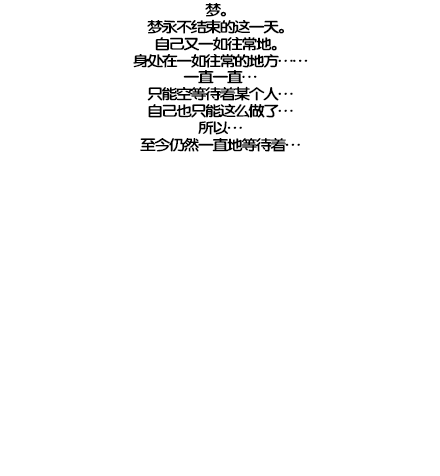
<style>
.page{position:relative;width:440px;height:476px;background:#ffffff}
.page>*{position:absolute;margin:0}
.t1{font:14.7px/16.8px "FZY4K--GBK1-0";letter-spacing:-0.13em;color:#000000;scale:1.14 1}
</style>
<div class="page">
<p class="t1" style="left:133px;top:3px;width:175px;height:149px;text-align:center">梦。<br>梦永不结束的这一天。<br>自己又一如往常地。<br>身处在一如往常的地方……<br>一直一直…<br>只能空等待着某个人…<br>自己也只能这么做了…<br>所以…<br>至今仍然一直地等待着…</p>
</div>
